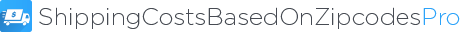
<style>
.page{position:relative;width:465px;height:32px;background:#ffffff}
.page>*{position:absolute;margin:0}
.t1{font:24px "Gotham-ExtraLight";color:#474b53}
.t2{font:24px "Gotham-ExtraLight";color:#2ca3fa}
</style>
<div class="page">
<p class="t1" style="left:39px;top:7px;width:421px;height:22px">ShippingCostsBasedOnZipcodes<span class="t2">Pro</span></p>
</div>
